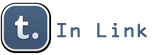
<style>
.page{position:relative;width:153px;height:55px;background:#ffffff}
.page>*{position:absolute;margin:0}
.t1{font:18px "OCRAStd";color:#45607f;font-weight:bold}
</style>
<div class="page">
<p class="t1" style="left:57px;top:23px;width:90px;height:15px">In Link</p>
</div>
